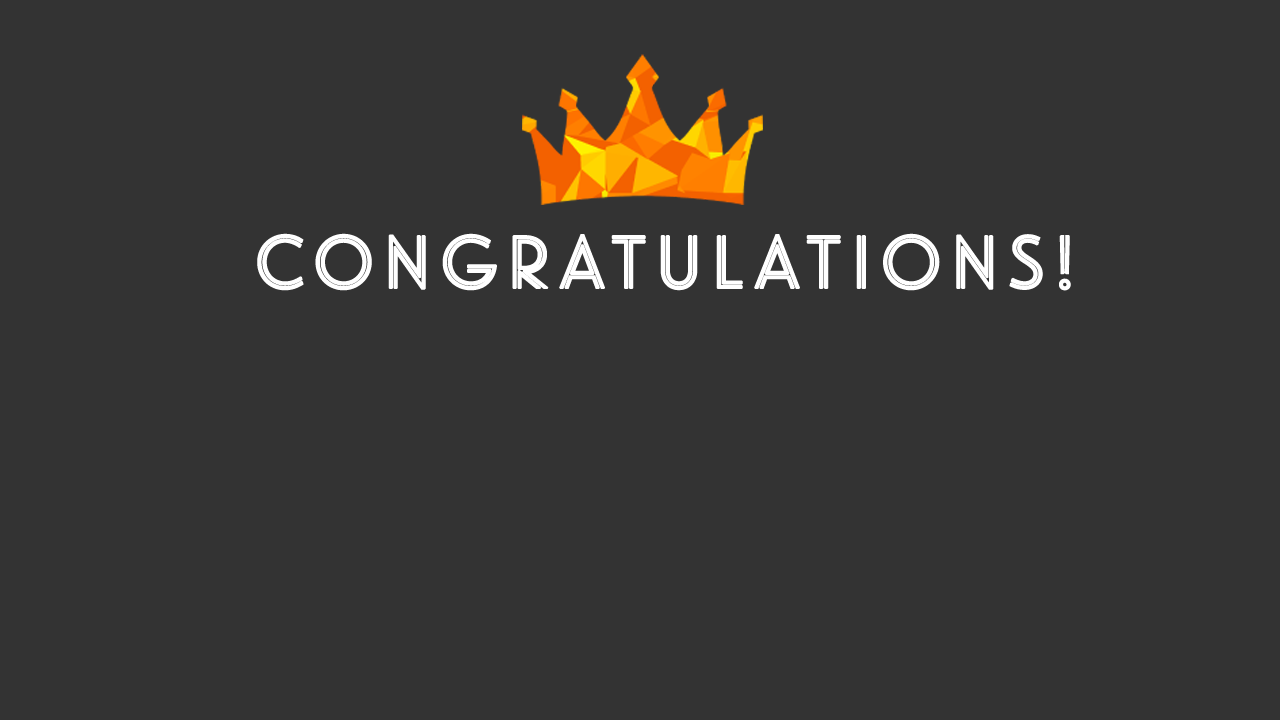
<style>
.page{position:relative;width:1280px;height:720px;background:#333333}
.page>*{position:absolute;margin:0}
.t1{font:72px "Landmark-Inline";letter-spacing:0.1em;color:#ffffff;font-weight:bold}
</style>
<div class="page">
<p class="t1" style="left:257px;top:233px;width:814px;height:58px">CONGRATULATIONS!</p>
</div>
